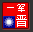
<style>
.page{position:relative;width:33px;height:32px;background:#f20000}
.page>*{position:absolute;margin:0}
.t1{font:10.4px "SimSun";color:#ffffff}
.t2{font:11.7px "SimSun";color:#ffffff}
</style>
<div class="page">
<p class="t1" style="left:7px;top:4px;width:18px;height:8px">一军</p>
<p class="t2" style="left:16px;top:15px;width:11px;height:12px">晋</p>
</div>
